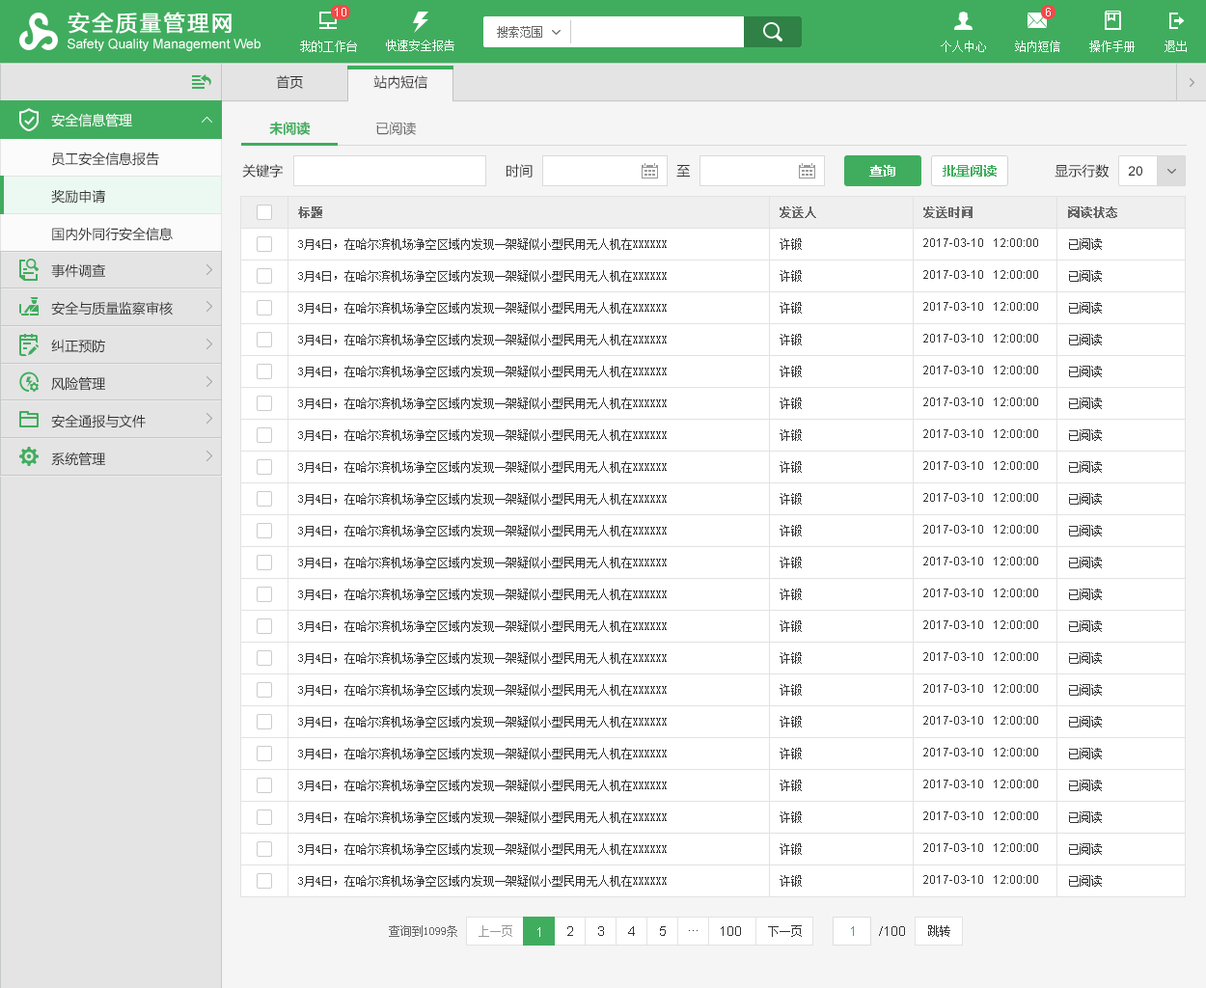
<style>
.page{position:relative;width:1206px;height:988px;background:#ffffff}
.page>*{position:absolute;margin:0}
.t1{font:13.5px "MicrosoftYaHei";color:#333333}
.t2{font:13.5px "MicrosoftYaHei";color:#ffffff}
.t3{font:13.5px "MicrosoftYaHei-Bold";color:#40ad5e}
.t4{font:13.5px "MicrosoftYaHei";color:#666666}
.t5{font:13.5px/37.6px "MicrosoftYaHei";color:#333333}
.t6{font:13.5px "MicrosoftYaHei-Bold";color:#ffffff}
.t7{font:13.5px "ArialMT";color:#333333}
.t8{font:11.6px "SimSun";color:#666666;font-weight:bold}
.t9{font:11.6px/31.9px "SimSun";color:#333333}
.t10{font:11.6px/31.9px "ArialMT";color:#333333}
.t11{font:11.6px "SimSun";color:#666666}
.t12{font:11.6px "SimSun";color:#999999}
.t13{font:13.5px "ArialMT";color:#ffffff}
.t14{font:11.6px "SimSun";color:#333333}
.t15{font:13.5px "ArialMT";color:#40ad5e}
</style>
<div class="page">
<p class="t1" style="left:276px;top:75px;width:27px;height:14px">首页</p>
<p class="t1" style="left:374px;top:75px;width:54px;height:14px">站内短信</p>
<p class="t2" style="left:51px;top:113px;width:81px;height:14px">安全信息管理</p>
<p class="t3" style="left:269px;top:122px;width:41px;height:13px">未阅读</p>
<p class="t4" style="left:376px;top:122px;width:40px;height:13px">已阅读</p>
<p class="t5" style="left:51px;top:152px;width:122px;height:89px">员工安全信息报告<br>奖励申请<br>国内外同行安全信息</p>
<p class="t1" style="left:242px;top:164px;width:41px;height:14px">关键字</p>
<p class="t1" style="left:507px;top:164px;width:26px;height:14px">时间</p>
<p class="t1" style="left:677px;top:165px;width:13px;height:12px">至</p>
<p class="t6" style="left:870px;top:165px;width:26px;height:12px">查询</p>
<p class="t3" style="left:943px;top:165px;width:54px;height:12px">批量阅读</p>
<p class="t1" style="left:1055px;top:164px;width:55px;height:14px">显示行数</p>
<p class="t7" style="left:1128px;top:166px;width:15px;height:10px">20</p>
<p class="t8" style="left:298px;top:207px;width:24px;height:11px">标题</p>
<p class="t8" style="left:780px;top:207px;width:37px;height:11px">发送人</p>
<p class="t8" style="left:924px;top:207px;width:49px;height:11px">发送时间</p>
<p class="t8" style="left:1068px;top:207px;width:50px;height:11px">阅读状态</p>
<p class="t9" style="left:298px;top:238px;width:369px;height:649px">3月4日，在哈尔滨机场净空区域内发现一架疑似小型民用无人机在XXXXXX<br>3月4日，在哈尔滨机场净空区域内发现一架疑似小型民用无人机在XXXXXX<br>3月4日，在哈尔滨机场净空区域内发现一架疑似小型民用无人机在XXXXXX<br>3月4日，在哈尔滨机场净空区域内发现一架疑似小型民用无人机在XXXXXX<br>3月4日，在哈尔滨机场净空区域内发现一架疑似小型民用无人机在XXXXXX<br>3月4日，在哈尔滨机场净空区域内发现一架疑似小型民用无人机在XXXXXX<br>3月4日，在哈尔滨机场净空区域内发现一架疑似小型民用无人机在XXXXXX<br>3月4日，在哈尔滨机场净空区域内发现一架疑似小型民用无人机在XXXXXX<br>3月4日，在哈尔滨机场净空区域内发现一架疑似小型民用无人机在XXXXXX<br>3月4日，在哈尔滨机场净空区域内发现一架疑似小型民用无人机在XXXXXX<br>3月4日，在哈尔滨机场净空区域内发现一架疑似小型民用无人机在XXXXXX<br>3月4日，在哈尔滨机场净空区域内发现一架疑似小型民用无人机在XXXXXX<br>3月4日，在哈尔滨机场净空区域内发现一架疑似小型民用无人机在XXXXXX<br>3月4日，在哈尔滨机场净空区域内发现一架疑似小型民用无人机在XXXXXX<br>3月4日，在哈尔滨机场净空区域内发现一架疑似小型民用无人机在XXXXXX<br>3月4日，在哈尔滨机场净空区域内发现一架疑似小型民用无人机在XXXXXX<br>3月4日，在哈尔滨机场净空区域内发现一架疑似小型民用无人机在XXXXXX<br>3月4日，在哈尔滨机场净空区域内发现一架疑似小型民用无人机在XXXXXX<br>3月4日，在哈尔滨机场净空区域内发现一架疑似小型民用无人机在XXXXXX<br>3月4日，在哈尔滨机场净空区域内发现一架疑似小型民用无人机在XXXXXX<br>3月4日，在哈尔滨机场净空区域内发现一架疑似小型民用无人机在XXXXXX</p>
<p class="t9" style="left:780px;top:238px;width:22px;height:649px">许锻<br>许锻<br>许锻<br>许锻<br>许锻<br>许锻<br>许锻<br>许锻<br>许锻<br>许锻<br>许锻<br>许锻<br>许锻<br>许锻<br>许锻<br>许锻<br>许锻<br>许锻<br>许锻<br>许锻<br>许锻</p>
<p class="t10" style="left:924px;top:238px;width:115px;height:646px">2017-03-10   12:00:00<br>2017-03-10   12:00:00<br>2017-03-10   12:00:00<br>2017-03-10   12:00:00<br>2017-03-10   12:00:00<br>2017-03-10   12:00:00<br>2017-03-10   12:00:00<br>2017-03-10   12:00:00<br>2017-03-10   12:00:00<br>2017-03-10   12:00:00<br>2017-03-10   12:00:00<br>2017-03-10   12:00:00<br>2017-03-10   12:00:00<br>2017-03-10   12:00:00<br>2017-03-10   12:00:00<br>2017-03-10   12:00:00<br>2017-03-10   12:00:00<br>2017-03-10   12:00:00<br>2017-03-10   12:00:00<br>2017-03-10   12:00:00<br>2017-03-10   12:00:00</p>
<p class="t9" style="left:1069px;top:238px;width:33px;height:649px">已阅读<br>已阅读<br>已阅读<br>已阅读<br>已阅读<br>已阅读<br>已阅读<br>已阅读<br>已阅读<br>已阅读<br>已阅读<br>已阅读<br>已阅读<br>已阅读<br>已阅读<br>已阅读<br>已阅读<br>已阅读<br>已阅读<br>已阅读<br>已阅读</p>
<p class="t5" style="left:51px;top:263px;width:122px;height:203px">事件调查<br>安全与质量监察审核<br>纠正预防<br>风险管理<br>安全通报与文件<br>系统管理</p>
<p class="t11" style="left:389px;top:926px;width:68px;height:11px">查询到1099条</p>
<p class="t12" style="left:479px;top:926px;width:34px;height:11px">上一页</p>
<p class="t13" style="left:538px;top:928px;width:3px;height:9px">1</p>
<p class="t7" style="left:568px;top:927px;width:5px;height:9px">2</p>
<p class="t7" style="left:598px;top:927px;width:6px;height:9px">3</p>
<p class="t7" style="left:628px;top:927px;width:7px;height:9px">4</p>
<p class="t7" style="left:660px;top:927px;width:6px;height:9px">5</p>
<p class="t7" style="left:721px;top:927px;width:20px;height:9px">100</p>
<p class="t14" style="left:768px;top:926px;width:34px;height:11px">下一页</p>
<p class="t15" style="left:851px;top:927px;width:3px;height:9px">1</p>
<p class="t7" style="left:879px;top:927px;width:26px;height:9px">/100</p>
<p class="t14" style="left:929px;top:926px;width:22px;height:11px">跳转</p>
<p class="t7" style="left:689px;top:930px;width:9px;height:1px">...</p>
</div>
